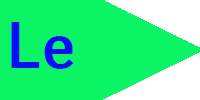
<style>
.page{position:relative;width:200px;height:100px;background:#0bf463}
.page>*{position:absolute;margin:0}
.t1{font:60px "EuphemiaUCAS-Bold";letter-spacing:0.02em;color:#090ef9}
</style>
<div class="page">
<p class="t1" style="left:11px;top:22px;width:63px;height:47px">Le</p>
</div>
